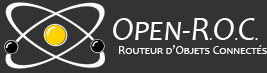
<style>
.page{position:relative;width:267px;height:73px;background:#333333}
.page>*{position:absolute;margin:0}
.t1{font:34.1px "Candara-Italic";color:#ffffff;font-variant:small-caps}
.t2{font:13.9px "Candara-Italic";color:#ffffff;font-variant:small-caps}
.t3{font:12px "Candara";color:#ffffff;font-variant:small-caps}
</style>
<div class="page">
<p class="t1" style="left:113px;top:18px;width:145px;height:22px">Open-R<span class="t2">.</span>O<span class="t2">.</span>C<span class="t2">.</span></p>
<p class="t3" style="left:119px;top:45px;width:148px;height:9px">Routeur d’Objets Connectés</p>
</div>
